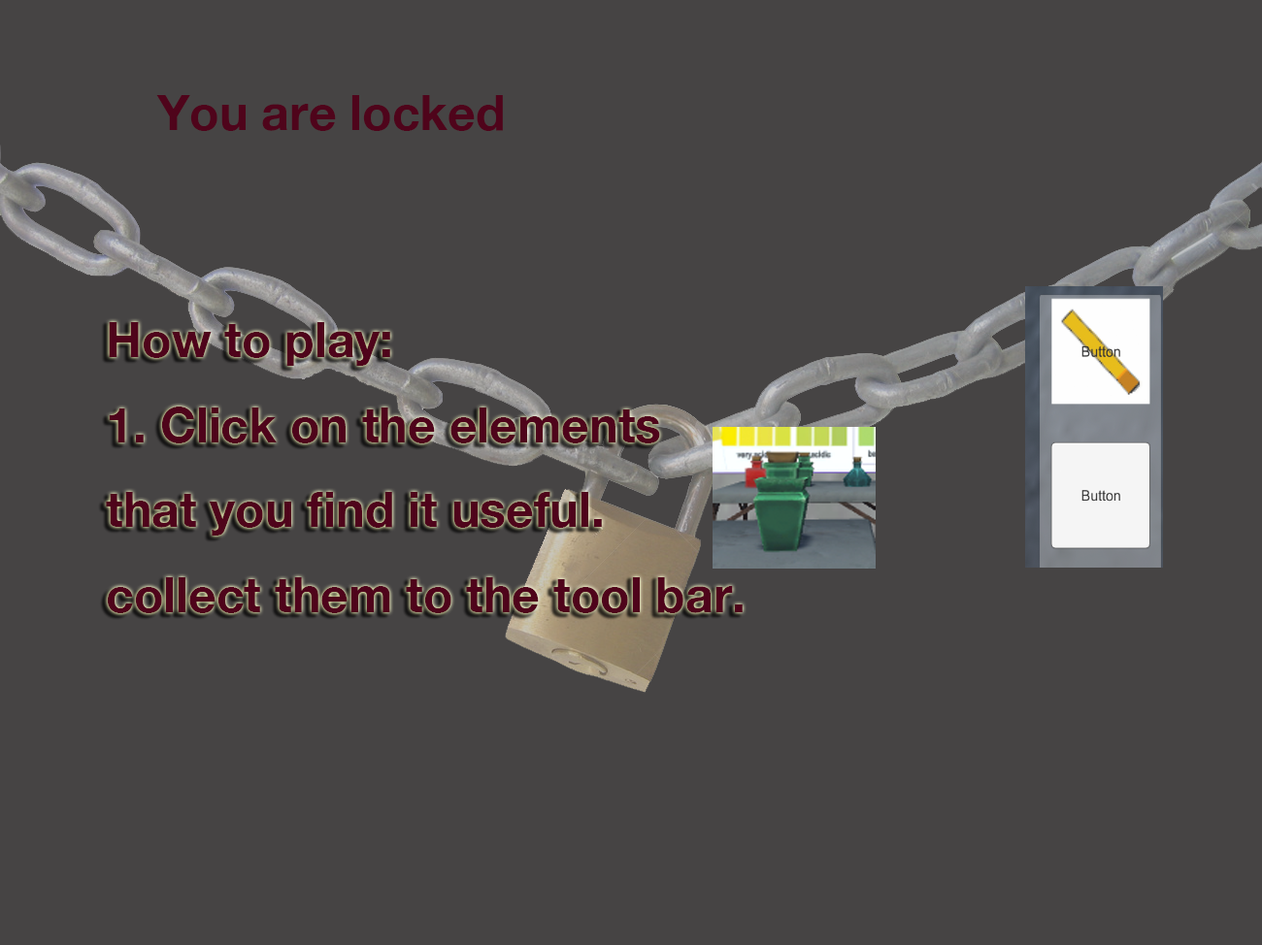
<style>
.page{position:relative;width:1262px;height:945px;background:#464444}
.page>*{position:absolute;margin:0}
.t1{font:48.5px "HelveticaNeue-Bold";color:#4f041b}
</style>
<div class="page">
<p class="t1" style="left:156px;top:95px;width:347px;height:36px">You are locked</p>
<p class="t1" style="left:106px;top:322px;width:636px;height:291px">How to play:<br>1. Click on the elements <br>that you find it useful. <br>collect them to the tool bar.</p>
</div>
